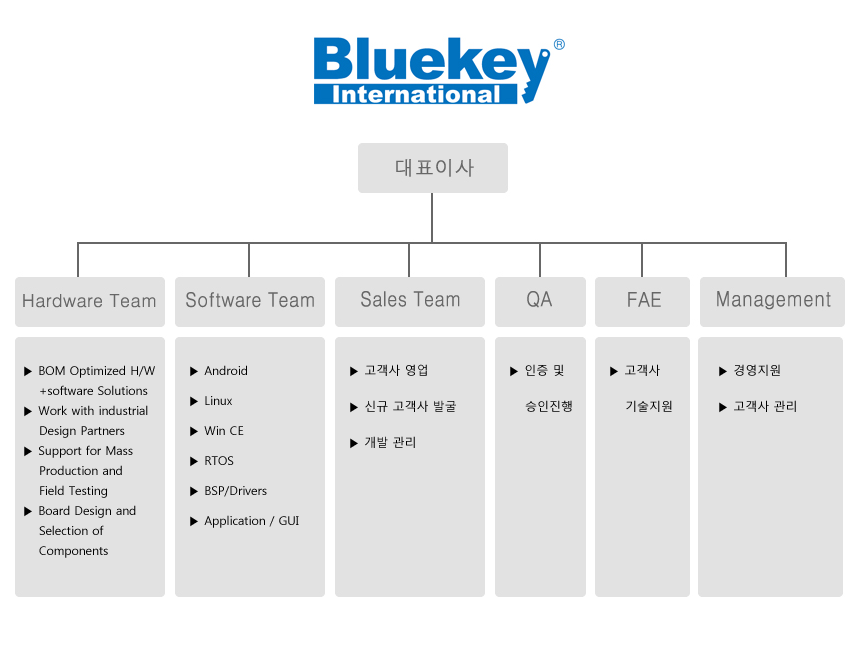
<style>
.page{position:relative;width:860px;height:652px;background:#ffffff}
.page>*{position:absolute;margin:0}
.t1{font:12px/20px "MalgunGothicRegular";color:#000000}
.t2{font:12px/30px "MalgunGothicRegular";color:#000000}
.t3{font:12px/36px "MalgunGothicRegular";color:#000000}
</style>
<div class="page">
<p class="t1" style="left:24px;top:365px;width:131px;height:193px">▶ BOM Optimized H/W<br>    +software Solutions<br>▶ Work with industrial<br>    Design Partners<br>▶ Support for Mass <br>    Production and <br>    Field Testing<br>▶ Board Design and<br>    Selection of <br>    Components</p>
<p class="t2" style="left:190px;top:365px;width:109px;height:163px">▶ Android<br>▶ Linux<br>▶ Win CE<br>▶ RTOS<br>▶ BSP/Drivers<br>▶ Application / GUI</p>
<p class="t3" style="left:350px;top:364px;width:106px;height:85px">▶ 고객사 영업<br>▶ 신규 고객사 발굴<br>▶ 개발 관리</p>
<p class="t3" style="left:510px;top:364px;width:62px;height:48px">▶ 인증 및<br>    승인진행</p>
<p class="t3" style="left:610px;top:364px;width:62px;height:48px">▶ 고객사<br>    기술지원</p>
<p class="t3" style="left:719px;top:364px;width:77px;height:49px">▶ 경영지원<br>▶ 고객사 관리</p>
</div>
